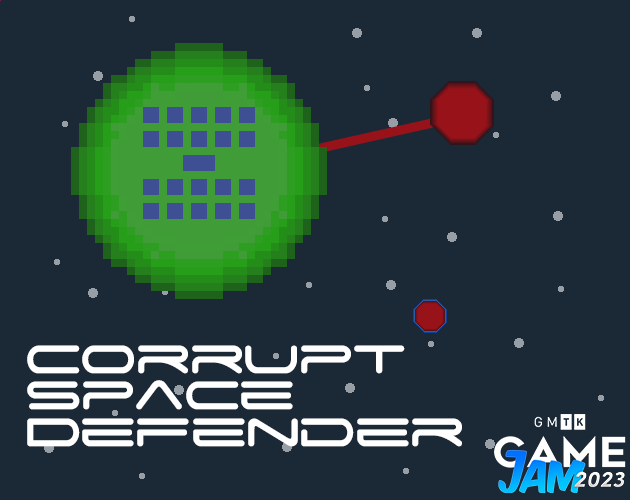
<style>
.page{position:relative;width:630px;height:500px;background:#1b2937}
.page>*{position:absolute;margin:0}
.t1{font:63.6px/36.6px "SpaceAge";letter-spacing:-0.04em;color:#ffffff}
</style>
<div class="page">
<p class="t1" style="left:27px;top:345px;width:435px;height:102px">Corrupt<br>Space<br>Defender</p>
</div>
